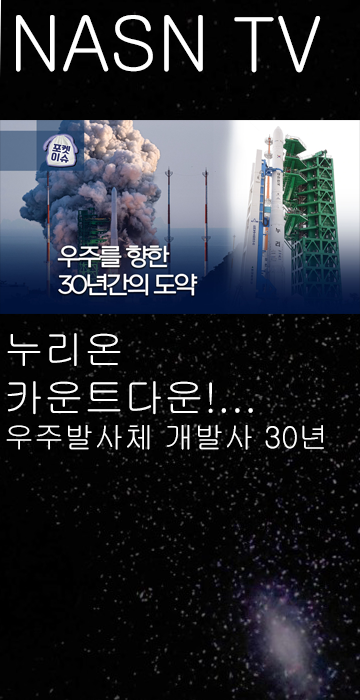
<style>
.page{position:relative;width:360px;height:700px;background:#020202}
.page>*{position:absolute;margin:0}
.t1{font:75px "Gulim";color:#ffffff}
.t2{font:40px "Gulim";color:#ffffff}
.t3{font:30px "Gulim";color:#ffffff}
</style>
<div class="page">
<p class="t1" style="left:16px;top:15px;width:187px;height:57px">NASN</p>
<p class="t1" style="left:234px;top:15px;width:87px;height:58px">TV</p>
<p class="t2" style="left:6px;top:333px;width:318px;height:117px">누리온 <br>카운트다운!...<br><span class="t3">우주발사체 개발사 30년</span></p>
</div>
